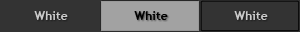
<style>
.page{position:relative;width:300px;height:32px;background:#333333}
.page>*{position:absolute;margin:0}
.t1{font:12px "TrebuchetMS-Bold";color:#cbcbcb}
.t2{font:12px "TrebuchetMS-Bold";color:#000000}
</style>
<div class="page">
<p class="t1" style="left:34px;top:11px;width:34px;height:9px">White</p>
<p class="t2" style="left:134px;top:11px;width:34px;height:9px">White</p>
<p class="t1" style="left:234px;top:11px;width:34px;height:9px">White</p>
</div>
